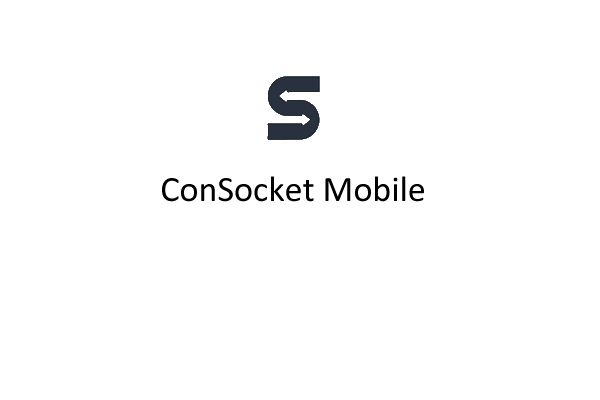
<style>
.page{position:relative;width:600px;height:400px;background:#ffffff}
.page>*{position:absolute;margin:0}
.t1{font:36px "Calibri";color:#000000}
</style>
<div class="page">
<p class="t1" style="left:162px;top:176px;width:262px;height:26px">ConSocket Mobile</p>
</div>
